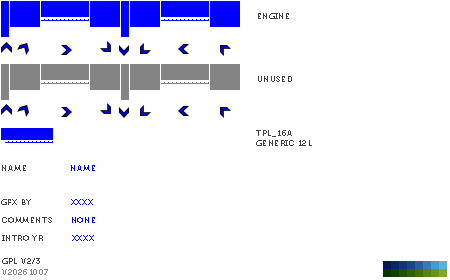
<style>
.page{position:relative;width:450px;height:280px;background:#ffffff}
.page>*{position:absolute;margin:0}
.t1{font:8px "Museo700-Regular";letter-spacing:0.075em;color:#404040;text-transform:uppercase}
.t2{font:8px "Museo700-Regular";letter-spacing:0.075em;color:#0000ff;text-transform:uppercase}
.t3{font:8px "Museo700-Regular";letter-spacing:0.075em;color:#848484;text-transform:uppercase}
</style>
<div class="page">
<p class="t1" style="left:258px;top:13px;width:31px;height:6px">ENGINE</p>
<p class="t1" style="left:258px;top:76px;width:34px;height:6px">UNUSED</p>
<p class="t1" style="left:256px;top:130px;width:56px;height:16px">tpl_16a<br>Generic 12L</p>
<p class="t1" style="left:2px;top:165px;width:24px;height:6px">name</p>
<p class="t2" style="left:71px;top:165px;width:24px;height:6px">name</p>
<p class="t1" style="left:1px;top:199px;width:30px;height:6px">gfx by</p>
<p class="t2" style="left:71px;top:199px;width:22px;height:6px">xxxx</p>
<p class="t1" style="left:2px;top:217px;width:50px;height:6px">comments</p>
<p class="t2" style="left:72px;top:217px;width:23px;height:6px">none</p>
<p class="t1" style="left:2px;top:235px;width:41px;height:6px">intro yr</p>
<p class="t2" style="left:72px;top:235px;width:22px;height:6px">xxxx</p>
<p class="t1" style="left:2px;top:258px;width:38px;height:6px">gpl v2/3</p>
<p class="t3" style="left:2px;top:269px;width:46px;height:6px">v20261007</p>
</div>
